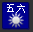
<style>
.page{position:relative;width:33px;height:32px;background:#000090}
.page>*{position:absolute;margin:0}
.t1{font:10.4px "SimSun";color:#ffffff}
</style>
<div class="page">
<p class="t1" style="left:7px;top:4px;width:18px;height:9px">五六</p>
</div>
